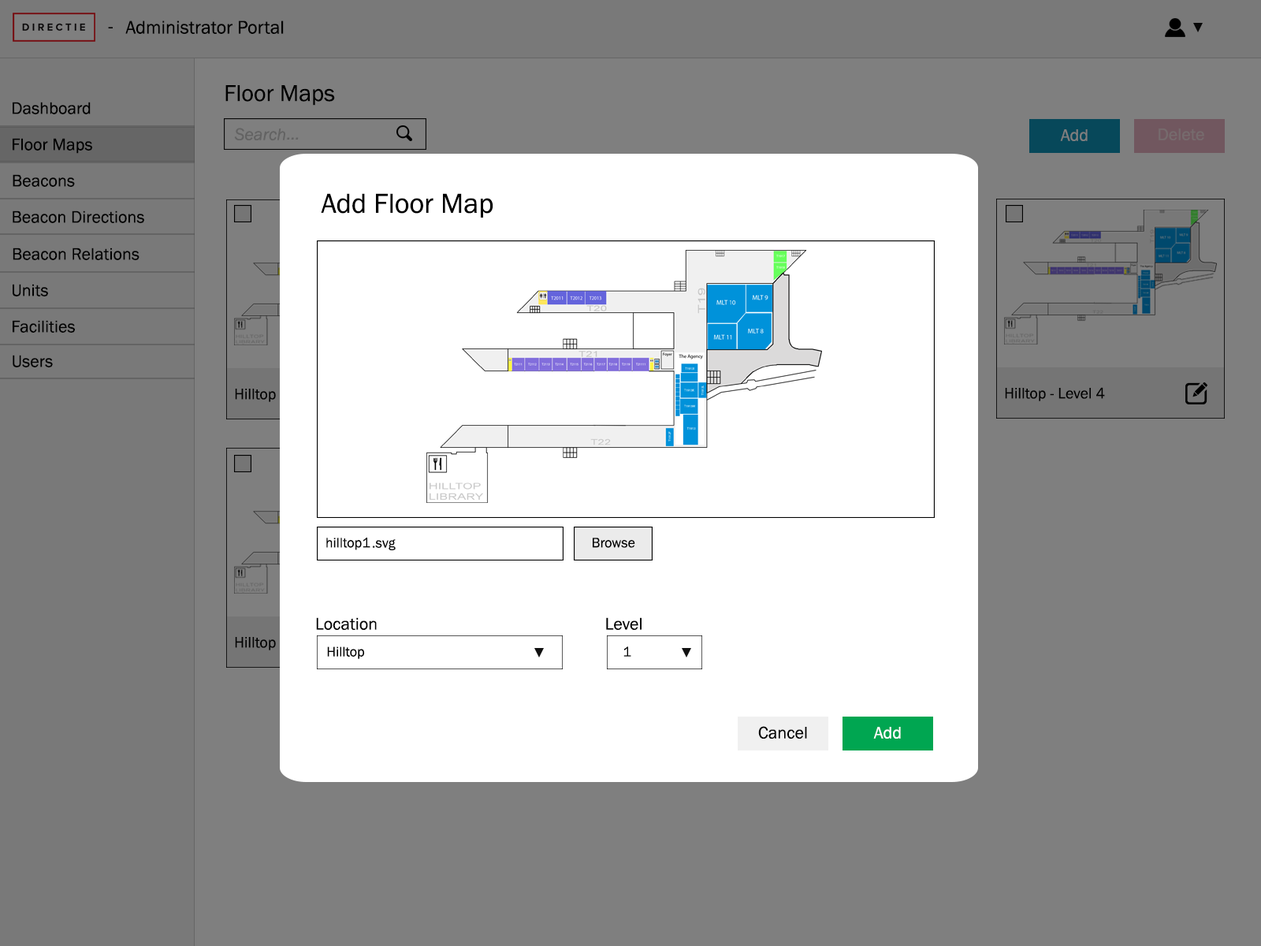
<style>
.page{position:relative;width:1261px;height:946px;background:#7f7f7f}
.page>*{position:absolute;margin:0}
.t1{font:18.9px "FranklinGothic-Book";color:#000000}
.t2{font:23.6px "FranklinGothic-Book";color:#000000}
.t3{font:17.3px "FranklinGothic-Book";color:#000000}
.t4{font:17.3px "FranklinGothic-Book";color:#7f7f7f}
.t5{font:17.3px "FranklinGothic-Book";color:#766b6d}
.t6{font:28.4px "FranklinGothic-Book";color:#000000}
.t7{font:14.2px "FranklinGothic-Book";color:#000000}
.t8{font:17.3px "FranklinGothic-Book";color:#010101}
.t9{font:17.3px "FranklinGothic-Book";color:#fefefe}
</style>
<div class="page">
<p class="t1" style="left:108px;top:27px;width:5px;height:1px">-</p>
<p class="t1" style="left:125px;top:20px;width:159px;height:14px">Administrator Portal</p>
<p class="t2" style="left:225px;top:85px;width:110px;height:21px">Floor Maps</p>
<p class="t3" style="left:13px;top:102px;width:78px;height:12px">Dashboard</p>
<p class="t3" style="left:13px;top:138px;width:79px;height:16px">Floor Maps</p>
<p class="t4" style="left:1060px;top:129px;width:28px;height:12px">Add</p>
<p class="t5" style="left:1158px;top:128px;width:46px;height:12px">Delete</p>
<p class="t3" style="left:13px;top:174px;width:62px;height:13px">Beacons</p>
<p class="t6" style="left:321px;top:193px;width:172px;height:25px">Add Floor Map</p>
<p class="t3" style="left:13px;top:210px;width:131px;height:13px">Beacon Directions</p>
<p class="t3" style="left:13px;top:247px;width:126px;height:13px">Beacon Relations</p>
<p class="t3" style="left:13px;top:284px;width:35px;height:12px">Units</p>
<p class="t3" style="left:13px;top:320px;width:62px;height:13px">Facilities</p>
<p class="t3" style="left:13px;top:355px;width:40px;height:12px">Users</p>
<p class="t7" style="left:326px;top:537px;width:44px;height:13px">hilltop1</p>
<p class="t7" style="left:373px;top:539px;width:23px;height:11px">svg.</p>
<p class="t7" style="left:593px;top:537px;width:42px;height:11px">Browse</p>
<p class="t3" style="left:316px;top:617px;width:61px;height:13px">Location</p>
<p class="t3" style="left:606px;top:617px;width:35px;height:13px">Level</p>
<p class="t7" style="left:327px;top:646px;width:37px;height:13px">Hilltop</p>
<p class="t7" style="left:623px;top:646px;width:8px;height:10px">1</p>
<p class="t8" style="left:758px;top:726px;width:49px;height:12px">Cancel</p>
<p class="t9" style="left:873px;top:727px;width:28px;height:11px">Add</p>
</div>
